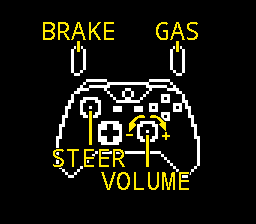
<style>
.page{position:relative;width:256px;height:224px;background:#000000}
.page>*{position:absolute;margin:0}
.t1{font:25px "NotoMono";color:#ffea00}
</style>
<div class="page">
<p class="t1" style="left:43px;top:22px;width:71px;height:18px">BRAKE</p>
<p class="t1" style="left:156px;top:22px;width:42px;height:18px">GAS</p>
<p class="t1" style="left:53px;top:149px;width:72px;height:18px">STEER</p>
<p class="t1" style="left:101px;top:172px;width:88px;height:18px">VOLUME</p>
</div>
